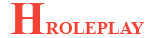
<style>
.page{position:relative;width:154px;height:38px;background:#ffffff}
.page>*{position:absolute;margin:0}
.t1{font:45px "TimesNewRomanPS-BoldMT";color:#f44336}
.t2{font:18px "TimesNewRomanPS-BoldMT";color:#f44336}
</style>
<div class="page">
<p class="t1" style="left:10px;top:3px;width:35px;height:31px">H</p>
<p class="t2" style="left:46px;top:22px;width:98px;height:12px">ROLEPLAY</p>
</div>
